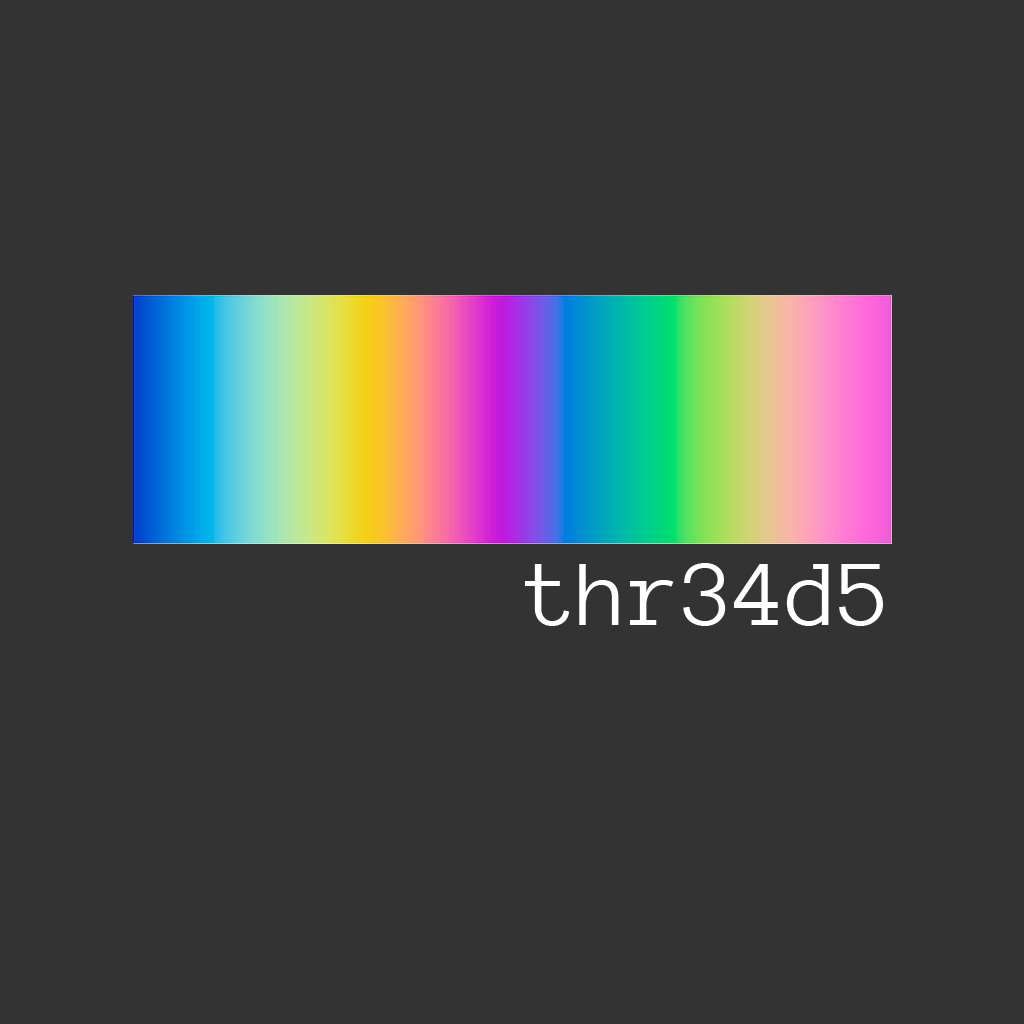
<style>
.page{position:relative;width:1024px;height:1024px;background:#333333}
.page>*{position:absolute;margin:0}
.t1{font:96px "AnonymousPro-Regular";color:#ffffff}
</style>
<div class="page">
<p class="t1" style="left:525px;top:563px;width:358px;height:63px">thr34d5</p>
</div>
